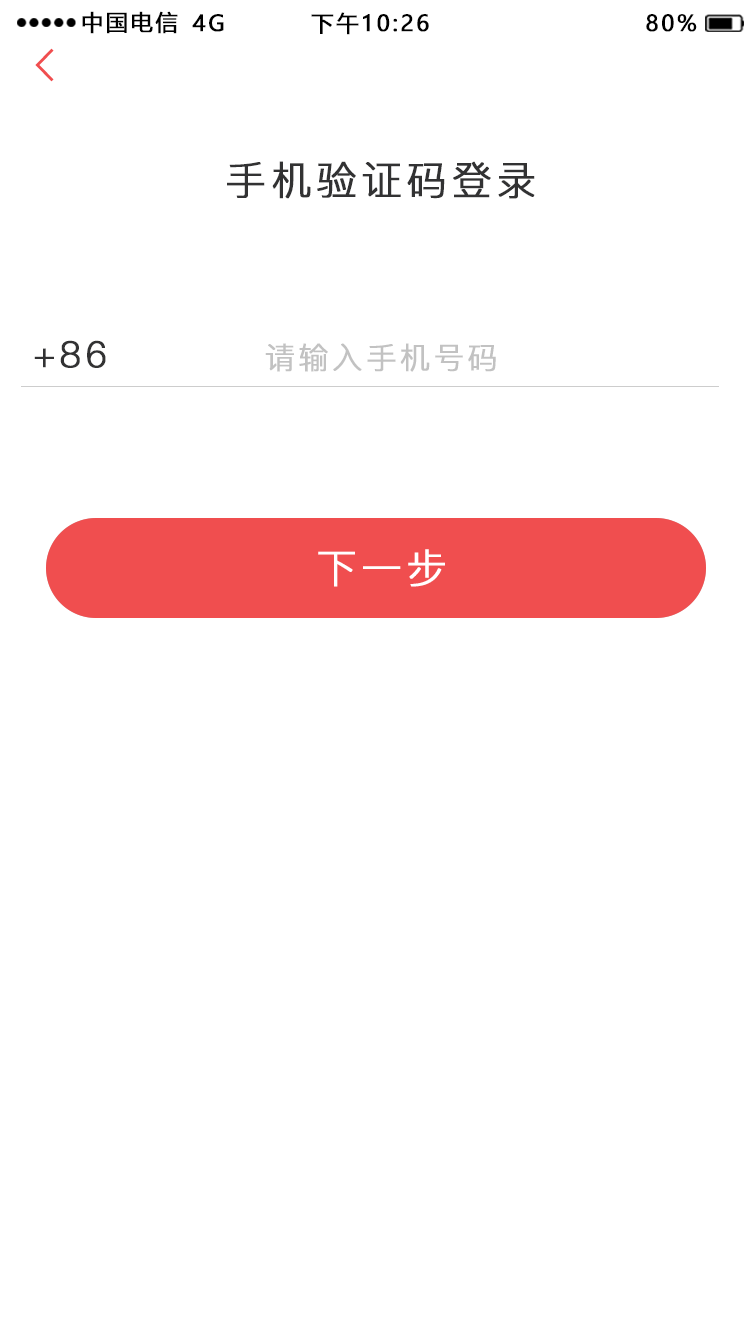
<style>
.page{position:relative;width:750px;height:1334px;background:#ffffff}
.page>*{position:absolute;margin:0}
.t1{font:22px "MicrosoftYaHei";letter-spacing:0.1em;color:#000000;text-transform:uppercase;font-weight:bold}
.t2{font:40px "PingFang-SC-Regular";letter-spacing:0.1em;color:#323233;text-transform:uppercase;font-weight:bold}
.t3{font:36px "PingFang-SC-Regular";letter-spacing:0.1em;color:#323233;text-transform:uppercase;font-weight:bold}
.t4{font:30px "PingFang-SC-Regular";letter-spacing:0.1em;color:#c2c2c2;text-transform:uppercase;font-weight:bold}
.t5{font:40px "PingFang-SC-Regular";letter-spacing:0.1em;color:#ffffff;text-transform:uppercase;font-weight:bold}
</style>
<div class="page">
<p class="t1" style="left:82px;top:11px;width:96px;height:23px">中国电信</p>
<p class="t1" style="left:192px;top:14px;width:32px;height:18px">4G</p>
<p class="t1" style="left:311px;top:12px;width:118px;height:23px">下午10:26</p>
<p class="t1" style="left:646px;top:14px;width:51px;height:18px">80%</p>
<p class="t2" style="left:227px;top:161px;width:308px;height:38px">手机验证码登录</p>
<p class="t3" style="left:34px;top:340px;width:72px;height:28px">+86</p>
<p class="t4" style="left:265px;top:343px;width:231px;height:29px">请输入手机号码</p>
<p class="t5" style="left:318px;top:549px;width:127px;height:38px">下一步</p>
</div>
